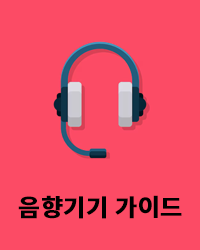
<style>
.page{position:relative;width:200px;height:250px;background:#fc4b65}
.page>*{position:absolute;margin:0}
.t1{font:24px "SpoqaHanSansNeo-Bold";color:#000000;font-weight:bold}
</style>
<div class="page">
<p class="t1" style="left:18px;top:195px;width:164px;height:24px">음향기기 가이드</p>
</div>
